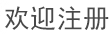
<style>
.page{position:relative;width:110px;height:40px;background:#ffffff}
.page>*{position:absolute;margin:0}
.t1{font:26px "SimHei";letter-spacing:0.025em;color:#494949}
</style>
<div class="page">
<p class="t1" style="left:5px;top:6px;width:104px;height:24px">欢迎注册</p>
</div>
